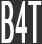
<style>
.page{position:relative;width:42px;height:44px;background:#333333}
.page>*{position:absolute;margin:0}
.t1{font:59.8px "MyanmarMN-Bold";color:#ffffff;scale:0.33 1}
</style>
<div class="page">
<p class="t1" style="left:1px;top:1px;width:41px;height:42px">B4T</p>
</div>
